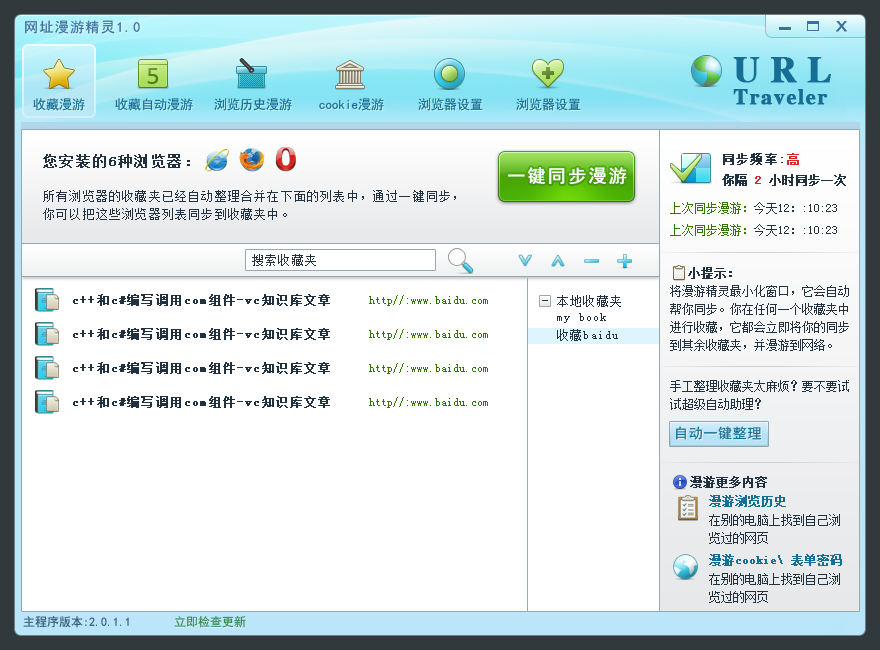
<style>
.page{position:relative;width:880px;height:650px;background:#ffffff}
.page>*{position:absolute;margin:0}
.t1{font:14px "SimHei";letter-spacing:0.1em;color:#3d6fa0}
.t2{font:12.8px "ArialMT";letter-spacing:0.1em;color:#3d6fa0;font-weight:bold;scale:1.25 1}
.t3{font:22px/22px "CTBiaoSongSJ";letter-spacing:0.05em;color:#176e95;font-weight:bold}
.t4{font:36px/22px "CTBiaoSongSJ";color:#176e95;font-weight:bold}
.t5{font:13px "SimHei";color:#176e95}
.t6{font:14px "SimSun";letter-spacing:0.1em;color:#223140;font-weight:bold}
.t7{font:12px "SimSun";letter-spacing:0.1em;color:#223140;font-weight:bold}
.t8{font:12px "SimSun";letter-spacing:0.1em;color:#d42b2b;font-weight:bold}
.t9{font:18px "SimHei";letter-spacing:0.1em;color:#ffffff;font-weight:bold}
.t10{font:12px "SimSun";color:#223140;font-weight:bold}
.t11{font:12px "SimSun";color:#d42b2b;font-weight:bold}
.t12{font:12px/18px "SimSun";letter-spacing:0.1em;color:#223140}
.t13{font:12px "SimSun";color:#223140}
.t14{font:12px "SimSun";color:#317502}
.t15{font:12px "SimSun";letter-spacing:0.1em;color:#223140}
.t16{font:12px/18px "SimSun";color:#223140}
.t17{font:12px/18px "SimSun";color:#223140;font-weight:bold}
.t18{font:12px "SimSun";color:#3e8d07}
.t19{font:14px "SimHei";letter-spacing:0.05em;color:#176e95}
.t20{font:12px "SimSun";color:#176e95;font-weight:bold}
.t21{font:12px "SimHei";color:#345c75}
.t22{font:12px "SimHei";color:#348a5b}
</style>
<div class="page">
<p class="t1" style="left:25px;top:20px;width:115px;height:14px">网址漫游精灵1.0</p>
<p class="t2" style="left:836px;top:21px;width:11px;height:11px">X</p>
<p class="t3" style="left:733px;top:57px;width:98px;height:48px"><span class="t4">U R L<br></span>Traveler</p>
<p class="t5" style="left:33px;top:98px;width:52px;height:13px">收藏漫游</p>
<p class="t5" style="left:115px;top:98px;width:78px;height:13px">收藏自动漫游</p>
<p class="t5" style="left:214px;top:98px;width:78px;height:13px">浏览历史漫游</p>
<p class="t5" style="left:319px;top:98px;width:65px;height:13px">cookie漫游</p>
<p class="t5" style="left:418px;top:98px;width:65px;height:13px">浏览器设置</p>
<p class="t5" style="left:516px;top:98px;width:65px;height:13px">浏览器设置</p>
<p class="t6" style="left:43px;top:154px;width:147px;height:14px">您安装的6种浏览器：</p>
<p class="t7" style="left:723px;top:153px;width:76px;height:12px">同步频率:<span class="t8">高</span></p>
<p class="t9" style="left:507px;top:167px;width:120px;height:18px">一键同步漫游</p>
<p class="t10" style="left:722px;top:174px;width:124px;height:12px">你隔 <span class="t11">2</span> 小时同步一次</p>
<p class="t12" style="left:43px;top:190px;width:413px;height:30px">所有浏览器的收藏夹已经自动整理合并在下面的列表中，通过一键同步，<br>你可以把这些浏览器列表同步到收藏夹中。</p>
<p class="t13" style="left:670px;top:202px;width:167px;height:12px"><span class="t14">上次同步漫游：</span>今天12：:10:23</p>
<p class="t13" style="left:670px;top:224px;width:167px;height:12px"><span class="t14">上次同步漫游：</span>今天12：:10:23</p>
<p class="t15" style="left:252px;top:254px;width:64px;height:12px">搜索收藏夹</p>
<p class="t16" style="left:670px;top:267px;width:179px;height:84px"><span class="t17">小提示：<br></span>将漫游精灵最小化窗口，它会自动<br>帮你同步。你在任何一个收藏夹中<br>进行收藏，它都会立即将你的同步<br>到其余收藏夹，并漫游到网络。</p>
<p class="t7" style="left:73px;top:294px;width:257px;height:12px">c++和c#编写调用com组件-vc知识库文章</p>
<p class="t14" style="left:369px;top:295px;width:119px;height:11px">http//:www.baidu.com</p>
<p class="t15" style="left:557px;top:295px;width:64px;height:12px">本地收藏夹</p>
<p class="t15" style="left:557px;top:313px;width:49px;height:10px">my book</p>
<p class="t7" style="left:73px;top:328px;width:257px;height:12px">c++和c#编写调用com组件-vc知识库文章</p>
<p class="t18" style="left:369px;top:329px;width:119px;height:11px">http//:www.baidu.com</p>
<p class="t15" style="left:557px;top:329px;width:61px;height:12px">收藏baidu</p>
<p class="t7" style="left:73px;top:362px;width:257px;height:12px">c++和c#编写调用com组件-vc知识库文章</p>
<p class="t18" style="left:369px;top:363px;width:119px;height:11px">http//:www.baidu.com</p>
<p class="t16" style="left:670px;top:380px;width:179px;height:30px">手工整理收藏夹太麻烦？要不要试<br>试超级自动助理？</p>
<p class="t7" style="left:73px;top:396px;width:257px;height:12px">c++和c#编写调用com组件-vc知识库文章</p>
<p class="t18" style="left:369px;top:397px;width:119px;height:11px">http//:www.baidu.com</p>
<p class="t19" style="left:676px;top:426px;width:86px;height:14px">自动一键整理</p>
<p class="t10" style="left:690px;top:476px;width:77px;height:12px">漫游更多内容</p>
<p class="t20" style="left:709px;top:495px;width:77px;height:12px">漫游浏览历史</p>
<p class="t16" style="left:709px;top:514px;width:131px;height:30px">在别的电脑上找到自己浏<br>览过的网页</p>
<p class="t20" style="left:709px;top:554px;width:133px;height:12px">漫游cookie\ 表单密码</p>
<p class="t16" style="left:709px;top:573px;width:131px;height:30px">在别的电脑上找到自己浏<br>览过的网页</p>
<p class="t21" style="left:23px;top:616px;width:106px;height:12px">主程序版本:2.0.1.1</p>
<p class="t22" style="left:174px;top:616px;width:72px;height:12px">立即检查更新</p>
</div>
